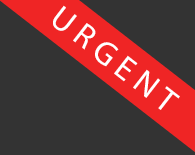
<style>
.page{position:relative;width:195px;height:155px;background:#333333}
.page>*{position:absolute;margin:0}
.t1{font:33.3px "MyriadPro-Regular";letter-spacing:0.2em;color:#ffffff}
</style>
<div class="page">
<p class="t1" style="left:53px;top:5px;width:127px;height:105px;rotate:38deg">URGENT</p>
</div>
